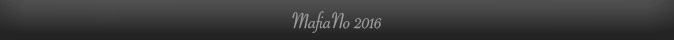
<style>
.page{position:relative;width:674px;height:40px}
.page>*{position:absolute;margin:0}
.t1{font:24px "SavoyeLetPlain";color:#9e9e9e}
</style>
<div class="page">
<p class="t1" style="left:292px;top:11px;width:90px;height:22px">MafiaNo 2016</p>
</div>
